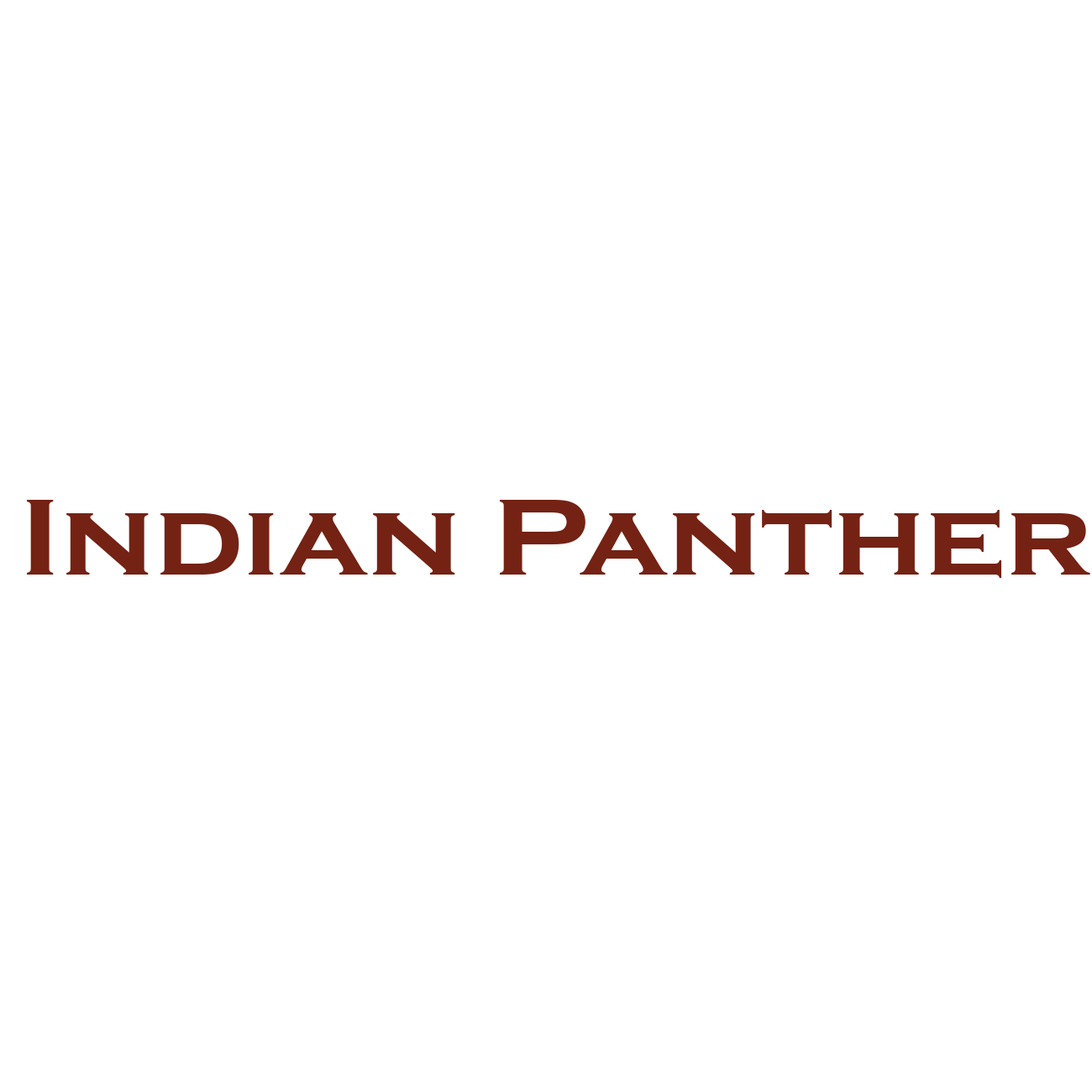
<style>
.page{position:relative;width:1092px;height:1092px;background:#ffffff}
.page>*{position:absolute;margin:0}
.t1{font:112.4px "CopperplateGothic-Bold";color:#742214;scale:1.12 1}
</style>
<div class="page">
<p class="t1" style="left:27px;top:500px;width:1063px;height:78px">Indian Panther</p>
</div>
